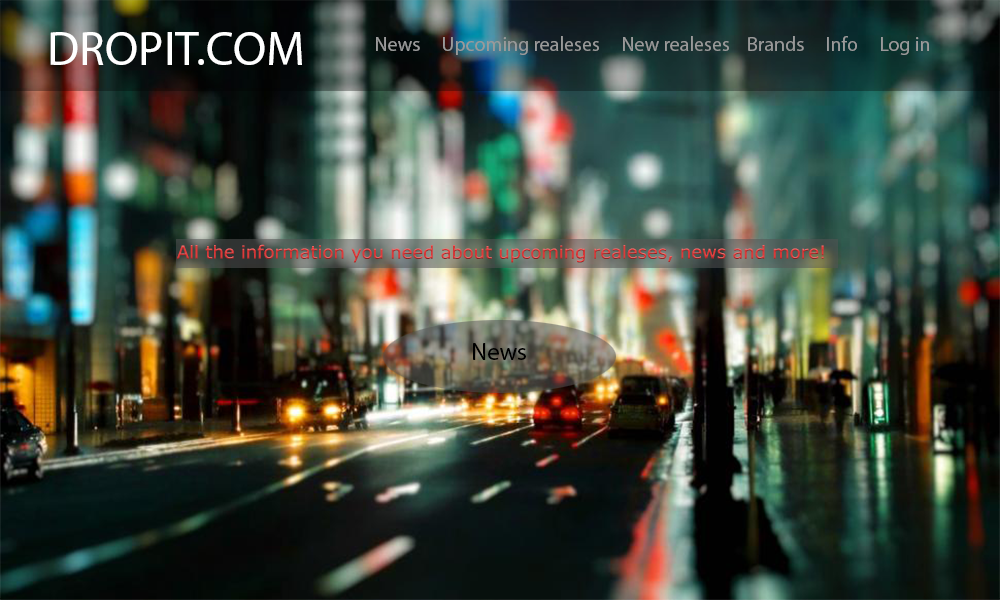
<style>
.page{position:relative;width:1000px;height:600px}
.page>*{position:absolute;margin:0}
.t1{font:48px "MyriadPro-Regular";color:#ffffff}
.t2{font:20px "MyriadPro-Regular";color:#848484}
.t3{font:18px "MSReferenceSansSerif"}
.t4{font:24px "MyriadPro-Regular";color:#000000}
</style>
<div class="page">
<p class="t1" style="left:50px;top:32px;width:252px;height:33px">DROPIT.COM</p>
<p class="t2" style="left:376px;top:36px;width:553px;height:19px">News     Upcoming realeses     New realeses    Brands     Info     Log in</p>
<p class="t3" style="left:177px;top:244px;width:647px;height:19px">All the information you need about upcoming realeses, news and more!</p>
<p class="t4" style="left:473px;top:343px;width:53px;height:17px">News</p>
</div>
